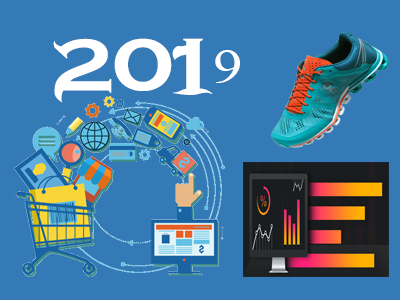
<style>
.page{position:relative;width:400px;height:300px;background:#337ab7}
.page>*{position:absolute;margin:0}
.t1{font:50.4px "HipotesisFreePersonalUse";color:#ffffff;scale:1.18 1}
.t2{font:50.4px "TimesNewRomanPSMT";color:#ffffff;scale:1.18 1}
</style>
<div class="page">
<p class="t1" style="left:53px;top:38px;width:187px;height:65px">201<span class="t2">9</span></p>
</div>
